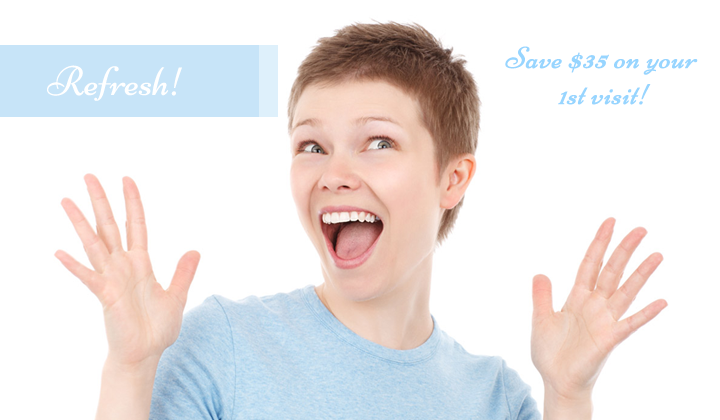
<style>
.page{position:relative;width:720px;height:420px;background:#ffffff}
.page>*{position:absolute;margin:0}
.t1{font:30px "Niconne-Regular";color:#97d5ff;font-weight:bold;font-style:italic}
</style>
<div class="page">
<p class="t1" style="left:505px;top:46px;width:193px;height:59px;text-align:center">Save $35 on your <br>1st visit!</p>
</div>
